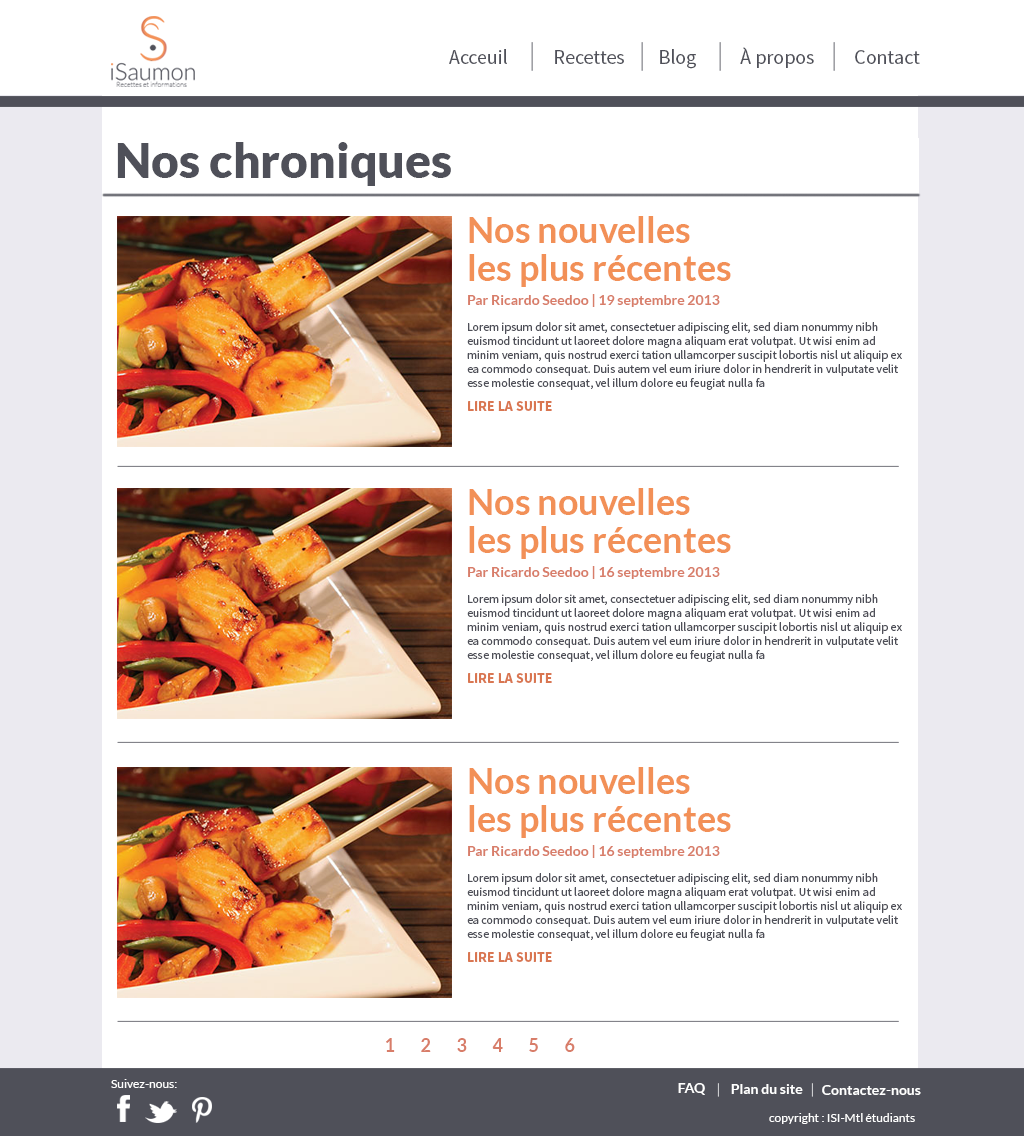
<style>
.page{position:relative;width:1024px;height:1136px;background:#ffffff}
.page>*{position:absolute;margin:0}
.t1{font:20.1px "SourceSansPro-Regular";color:#4f5059}
.t2{font:48px "Lato-Black";color:#4f5059}
.t3{font:14px/24px "Lato-Bold";color:#d87d69}
.t4{font:36px/38px "Lato-Bold";color:#f29057}
.t5{font:12px/14px "SourceSansPro-Regular";color:#4f5059}
.t6{font:14px "SourceSansPro-Bold";color:#d97651}
.t7{font:18px "Lato-Bold";color:#d87d69}
.t8{font:12px "Lato-Regular";color:#ffffff}
.t9{font:14px "Lato-Bold";color:#ffffff}
</style>
<div class="page">
<p class="t1" style="left:449px;top:49px;width:58px;height:15px">Acceuil</p>
<p class="t1" style="left:555px;top:50px;width:69px;height:14px">Recettes</p>
<p class="t1" style="left:660px;top:49px;width:36px;height:20px">Blog</p>
<p class="t1" style="left:740px;top:47px;width:74px;height:21px">À propos</p>
<p class="t1" style="left:855px;top:50px;width:65px;height:14px">Contact</p>
<p class="t2" style="left:117px;top:142px;width:334px;height:44px">Nos chroniques</p>
<p class="t3" style="left:468px;top:216px;width:263px;height:91px"><span class="t4">Nos nouvelles<br>les plus récentes<br></span>Par Ricardo Seedoo | 19 septembre 2013</p>
<p class="t5" style="left:467px;top:322px;width:435px;height:68px">Lorem ipsum dolor sit amet, consectetuer adipiscing elit, sed diam nonummy nibh euismod tincidunt ut laoreet dolore magna aliquam erat volutpat. Ut wisi enim ad minim veniam, quis nostrud exerci tation ullamcorper suscipit lobortis nisl ut aliquip ex ea commodo consequat. Duis autem vel eum iriure dolor in hendrerit in vulputate velit esse molestie consequat, vel illum dolore eu feugiat nulla fa</p>
<p class="t6" style="left:468px;top:401px;width:84px;height:10px">LIRE LA SUITE</p>
<p class="t3" style="left:468px;top:488px;width:263px;height:91px"><span class="t4">Nos nouvelles<br>les plus récentes<br></span>Par Ricardo Seedoo | 16 septembre 2013</p>
<p class="t5" style="left:467px;top:594px;width:435px;height:68px">Lorem ipsum dolor sit amet, consectetuer adipiscing elit, sed diam nonummy nibh euismod tincidunt ut laoreet dolore magna aliquam erat volutpat. Ut wisi enim ad minim veniam, quis nostrud exerci tation ullamcorper suscipit lobortis nisl ut aliquip ex ea commodo consequat. Duis autem vel eum iriure dolor in hendrerit in vulputate velit esse molestie consequat, vel illum dolore eu feugiat nulla fa</p>
<p class="t6" style="left:468px;top:673px;width:84px;height:10px">LIRE LA SUITE</p>
<p class="t3" style="left:468px;top:767px;width:263px;height:91px"><span class="t4">Nos nouvelles<br>les plus récentes<br></span>Par Ricardo Seedoo | 16 septembre 2013</p>
<p class="t5" style="left:467px;top:873px;width:435px;height:68px">Lorem ipsum dolor sit amet, consectetuer adipiscing elit, sed diam nonummy nibh euismod tincidunt ut laoreet dolore magna aliquam erat volutpat. Ut wisi enim ad minim veniam, quis nostrud exerci tation ullamcorper suscipit lobortis nisl ut aliquip ex ea commodo consequat. Duis autem vel eum iriure dolor in hendrerit in vulputate velit esse molestie consequat, vel illum dolore eu feugiat nulla fa</p>
<p class="t6" style="left:468px;top:952px;width:84px;height:10px">LIRE LA SUITE</p>
<p class="t7" style="left:386px;top:1038px;width:189px;height:14px">1 2 3 4 5 6</p>
<p class="t8" style="left:111px;top:1079px;width:66px;height:9px">Suivez-nous:</p>
<p class="t9" style="left:678px;top:1083px;width:27px;height:12px">FAQ</p>
<p class="t9" style="left:731px;top:1084px;width:72px;height:10px">Plan du site</p>
<p class="t9" style="left:822px;top:1085px;width:99px;height:10px">Contactez-nous</p>
<p class="t8" style="left:769px;top:1113px;width:146px;height:11px">copyright : ISI-Mtl étudiants</p>
</div>
